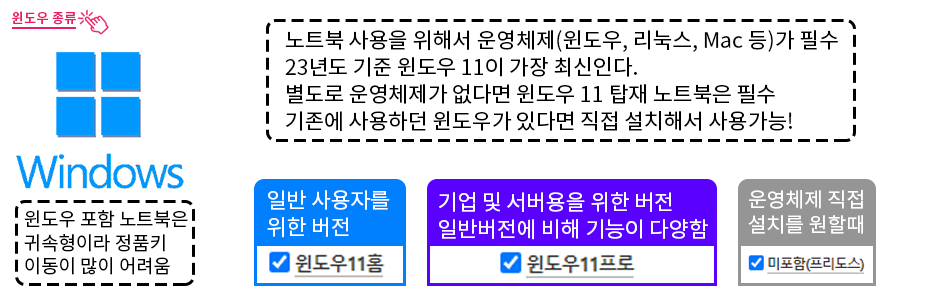
<style>
.page{position:relative;width:945px;height:297px;background:#ffffff}
.page>*{position:absolute;margin:0}
.t1{font:13.5px "NotoSansKR-Bold";color:#e91e63}
.t2{font:21.4px/26.9px "NotoSansKR-Regular";color:#000000}
.t3{font:21.4px/26.9px "NotoSansKR-Regular";color:#ffffff}
.t4{font:20.4px/25.6px "NotoSansKR-Regular";color:#ffffff}
.t5{font:18.9px/23.7px "NotoSansKR-Regular";color:#000000}
</style>
<div class="page">
<p class="t1" style="left:12px;top:11px;width:64px;height:14px">윈도우 종류</p>
<p class="t2" style="left:285px;top:30px;width:553px;height:102px">노트북 사용을 위해서 운영체제(윈도우, 리눅스, Mac 등)가 필수<br>23년도 기준 윈도우 11이 가장 최신인다.<br>별도로 운영체제가 없다면 윈도우 11 탑재 노트북은 필수<br>기존에 사용하던 윈도우가 있다면 직접 설치해서 사용가능!</p>
<p class="t3" style="left:267px;top:190px;width:123px;height:48px">일반 사용자를<br>위한 버전</p>
<p class="t3" style="left:439px;top:192px;width:269px;height:48px">기업 및 서버용을 위한 버전<br>일반버전에 비해 기능이 다양함</p>
<p class="t4" style="left:748px;top:189px;width:115px;height:45px">운영체제 직접<br>설치를 원할때</p>
<p class="t5" style="left:24px;top:210px;width:164px;height:65px">윈도우 포함 노트북은<br>귀속형이라 정품키 <br>이동이 많이 어려움</p>
</div>
